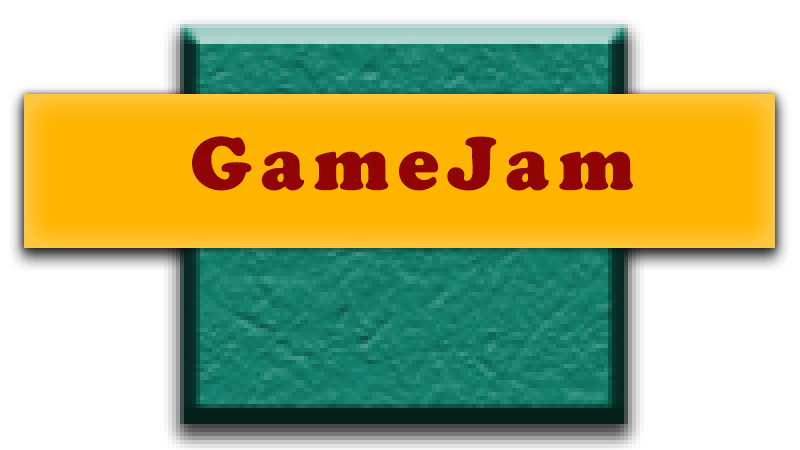
<style>
.page{position:relative;width:800px;height:450px;background:#ffffff}
.page>*{position:absolute;margin:0}
.t1{font:74px "CooperBlackStd";letter-spacing:0.12em;color:#900404}
</style>
<div class="page">
<p class="t1" style="left:192px;top:136px;width:441px;height:55px">GameJam</p>
</div>
